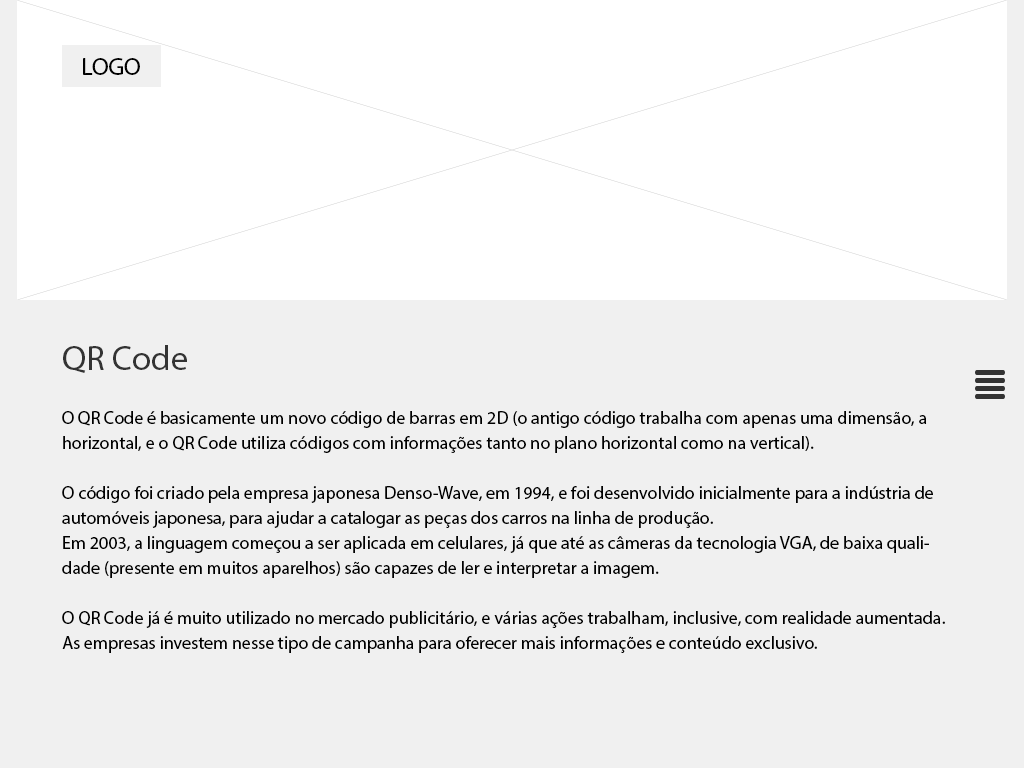
<style>
.page{position:relative;width:1024px;height:768px;background:#f0f0f0}
.page>*{position:absolute;margin:0}
.t1{font:12px "MyriadPro-Regular";color:#000000}
.t2{font:18px/25px "MyriadPro-Regular";color:#000000}
.t3{font:35px "MyriadPro-Regular";color:#333333}
</style>
<div class="page">
<p class="t1" style="left:83px;top:58px;width:57px;height:17px">LOGO</p>
<p class="t2" style="left:62px;top:345px;width:883px;height:308px"><span class="t3">QR Code<br><br></span>O QR Code é basicamente um novo código de barras em 2D (o antigo código trabalha com apenas uma dimensão, a horizontal, e o QR Code utiliza códigos com informações tanto no plano horizontal como na vertical).<br><br>O código foi criado pela empresa japonesa Denso-Wave, em 1994, e foi desenvolvido inicialmente para a indústria de automóveis japonesa, para ajudar a catalogar as peças dos carros na linha de produção.<br>Em 2003, a linguagem começou a ser aplicada em celulares, já que até as câmeras da tecnologia VGA, de baixa qualidade (presente em muitos aparelhos) são capazes de ler e interpretar a imagem.<br><br>O QR Code já é muito utilizado no mercado publicitário, e várias ações trabalham, inclusive, com realidade aumentada. As empresas investem nesse tipo de campanha para oferecer mais informações e conteúdo exclusivo.</p>
</div>
